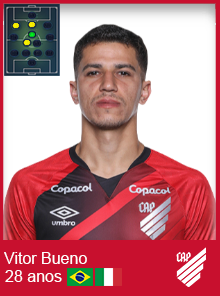
<style>
.page{position:relative;width:220px;height:296px;background:#ffffff}
.page>*{position:absolute;margin:0}
.t1{font:16px "ArialMT";color:#ffffff}
</style>
<div class="page">
<p class="t1" style="left:4px;top:252px;width:83px;height:12px">Vitor Bueno</p>
<p class="t1" style="left:5px;top:270px;width:57px;height:12px">28 anos</p>
</div>
